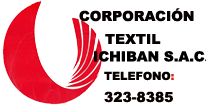
<style>
.page{position:relative;width:206px;height:105px;background:#ffffff}
.page>*{position:absolute;margin:0}
.t1{font:13.9px "Arial-Black";color:#050100}
.t2{font:13.9px "Arial-Black";color:#060100}
.t3{font:13.9px "Arial-Black";color:#010000}
.t4{font:16.7px "AmericanTextBT-Regular";color:#0f0301}
.t5{font:11.1px "Arial-Black";color:#070100}
.t6{font:11.1px "Arial-Black";color:#dc2507}
.t7{font:11.1px "Calligraphic421BT-RomanB";color:#dc2507}
.t8{font:13.9px "Arial-Black";color:#0b0200}
</style>
<div class="page">
<p class="t1" style="left:79px;top:8px;width:115px;height:14px">CORPORACIÓN</p>
<p class="t2" style="left:105px;top:34px;width:56px;height:10px">TEXTIL</p>
<p class="t3" style="left:94px;top:51px;width:114px;height:11px">ICHIBAN S.A.C<span class="t4">.</span></p>
<p class="t5" style="left:104px;top:71px;width:70px;height:10px">TELEFONO<span class="t6">:  </span><span class="t7">           44</span></p>
<p class="t8" style="left:104px;top:91px;width:69px;height:12px">323-8385</p>
</div>
